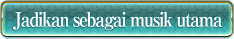
<style>
.page{position:relative;width:234px;height:39px}
.page>*{position:absolute;margin:0}
.t1{font:20px "RyuminPro-ExBold";letter-spacing:-0.08em;color:#ffffff;scale:0.9 1}
</style>
<div class="page">
<p class="t1" style="left:12px;top:11px;width:211px;height:19px">Jadikan sebagai musik utama</p>
</div>
